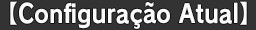
<style>
.page{position:relative;width:256px;height:30px;background:#333333}
.page>*{position:absolute;margin:0}
.t1{font:25.3px "RodinPro-B";letter-spacing:0.013em;color:#fbfafb;scale:0.87 1}
</style>
<div class="page">
<p class="t1" style="left:10px;top:1px;width:237px;height:28px">【Configuração Atual】</p>
</div>
